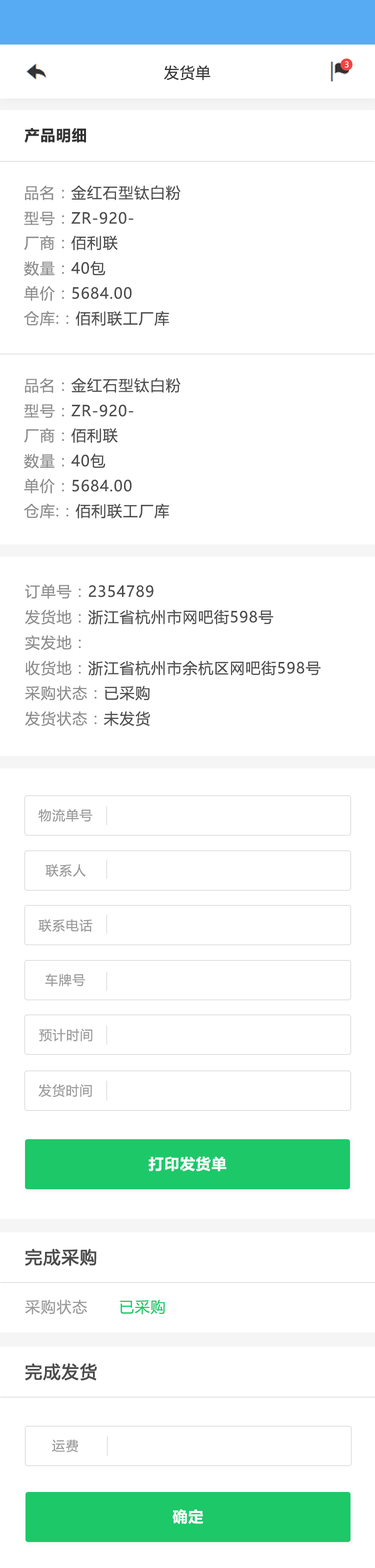
<style>
.page{position:relative;width:375px;height:1568px;background:#ffffff}
.page>*{position:absolute;margin:0}
.t1{font:15px "MicrosoftYaHeiUI";letter-spacing:0.05em;color:#333333}
.t2{font:8px "MicrosoftYaHeiUI";color:#ffffff}
.t3{font:15px "MicrosoftYaHeiUI-Bold";letter-spacing:0.05em;color:#333333}
.t4{font:15px "MicrosoftYaHeiUI";letter-spacing:0.05em;color:#4c4c4c}
.t5{font:15px "MicrosoftYaHeiUI";letter-spacing:0.05em;color:#8c8c8c}
.t6{font:13px "MicrosoftYaHeiUI";letter-spacing:0.05em;color:#999999}
.t7{font:15px "MicrosoftYaHeiUI-Bold";letter-spacing:0.05em;color:#ffffff}
.t8{font:17px "MicrosoftYaHeiUI";letter-spacing:0.05em;color:#4c4c4c;font-weight:bold}
.t9{font:15px "MicrosoftYaHeiUI";letter-spacing:0.05em;color:#999999}
.t10{font:15px "MicrosoftYaHeiUI";letter-spacing:0.05em;color:#1dc869}
</style>
<div class="page">
<p class="t1" style="left:164px;top:65px;width:47px;height:16px">发货单</p>
<p class="t2" style="left:345px;top:61px;width:4px;height:7px">3</p>
<p class="t3" style="left:25px;top:128px;width:61px;height:15px">产品明细</p>
<p class="t4" style="left:25px;top:185px;width:156px;height:15px"><span class="t5">品名：</span>金红石型钛白粉</p>
<p class="t4" style="left:24px;top:211px;width:110px;height:15px"><span class="t5">型号：</span>ZR-920-</p>
<p class="t5" style="left:24px;top:235px;width:94px;height:15px">厂商：<span class="t4">佰利联</span></p>
<p class="t5" style="left:24px;top:261px;width:82px;height:15px">数量：<span class="t4">40包</span></p>
<p class="t4" style="left:24px;top:286px;width:108px;height:15px"><span class="t5">单价：</span>5684.00</p>
<p class="t4" style="left:24px;top:311px;width:145px;height:15px"><span class="t5">仓库:：</span>佰利联工厂库</p>
<p class="t4" style="left:25px;top:378px;width:156px;height:15px"><span class="t5">品名：</span>金红石型钛白粉</p>
<p class="t4" style="left:24px;top:404px;width:110px;height:14px"><span class="t5">型号：</span>ZR-920-</p>
<p class="t5" style="left:24px;top:428px;width:94px;height:15px">厂商：<span class="t4">佰利联</span></p>
<p class="t5" style="left:24px;top:453px;width:82px;height:16px">数量：<span class="t4">40包</span></p>
<p class="t4" style="left:24px;top:478px;width:108px;height:16px"><span class="t5">单价：</span>5684.00</p>
<p class="t4" style="left:24px;top:503px;width:145px;height:16px"><span class="t5">仓库:：</span>佰利联工厂库</p>
<p class="t4" style="left:25px;top:584px;width:129px;height:15px"><span class="t5">订单号：</span>2354789</p>
<p class="t4" style="left:25px;top:609px;width:249px;height:16px"><span class="t5">发货地：</span>浙江省杭州市网吧街598号</p>
<p class="t5" style="left:25px;top:635px;width:56px;height:15px">实发地：</p>
<p class="t4" style="left:26px;top:660px;width:295px;height:16px"><span class="t5">收货地：</span>浙江省杭州市余杭区网吧街598号</p>
<p class="t5" style="left:25px;top:685px;width:125px;height:15px">采购状态：<span class="t4">已采购</span></p>
<p class="t5" style="left:25px;top:711px;width:125px;height:15px">发货状态：<span class="t4">未发货</span></p>
<p class="t6" style="left:39px;top:809px;width:54px;height:13px">物流单号</p>
<p class="t6" style="left:46px;top:864px;width:40px;height:13px">联系人</p>
<p class="t6" style="left:39px;top:919px;width:54px;height:13px">联系电话</p>
<p class="t6" style="left:45px;top:974px;width:41px;height:13px">车牌号</p>
<p class="t6" style="left:39px;top:1029px;width:54px;height:13px">预计时间</p>
<p class="t6" style="left:39px;top:1084px;width:53px;height:13px">发货时间</p>
<p class="t7" style="left:149px;top:1156px;width:78px;height:16px">打印发货单</p>
<p class="t8" style="left:25px;top:1248px;width:72px;height:18px">完成采购</p>
<p class="t9" style="left:25px;top:1299px;width:63px;height:15px">采购状态</p>
<p class="t10" style="left:120px;top:1300px;width:45px;height:14px">已采购</p>
<p class="t8" style="left:25px;top:1363px;width:72px;height:18px">完成发货</p>
<p class="t6" style="left:52px;top:1439px;width:27px;height:13px">运费</p>
<p class="t7" style="left:173px;top:1509px;width:31px;height:15px">确定</p>
</div>
